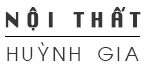
<style>
.page{position:relative;width:144px;height:72px;background:#ffffff}
.page>*{position:absolute;margin:0}
.t1{font:20px "Krungthep";letter-spacing:0.3em;color:#363636;font-weight:bold}
.t2{font:20px "SVN-Beast";letter-spacing:0.2em;color:#363636}
</style>
<div class="page">
<p class="t1" style="left:5px;top:7px;width:136px;height:24px">NỘI THẤT</p>
<p class="t2" style="left:7px;top:42px;width:132px;height:19px">HUỲNH GIA</p>
</div>
